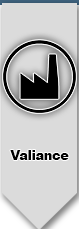
<style>
.page{position:relative;width:79px;height:229px;background:#dbdbdb}
.page>*{position:absolute;margin:0}
.t1{font:12.5px "Arial-Black";letter-spacing:-0.01em;color:#000000}
</style>
<div class="page">
<p class="t1" style="left:10px;top:150px;width:59px;height:10px">Valiance</p>
</div>
